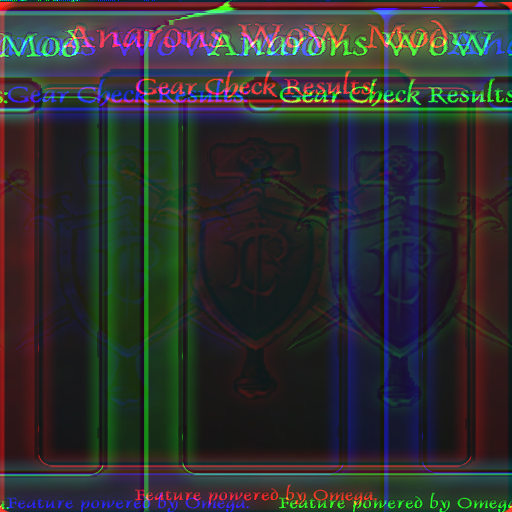
<style>
.page{position:relative;width:512px;height:512px}
.page>*{position:absolute;margin:0}
.t1{font:37.3px "Skurri";scale:1.33 1}
.t2{font:24px "Skurri";scale:1.33 1}
.t3{font:16px "Skurri";letter-spacing:0.04em;scale:1.33 1}
</style>
<div class="page">
<p class="t1" style="left:63px;top:17px;width:386px;height:30px">Anarons WoW Mod</p>
<p class="t2" style="left:135px;top:68px;width:241px;height:29px">Gear Check Results:</p>
<p class="t3" style="left:135px;top:482px;width:242px;height:21px">Feature powered by Omega.</p>
</div>
